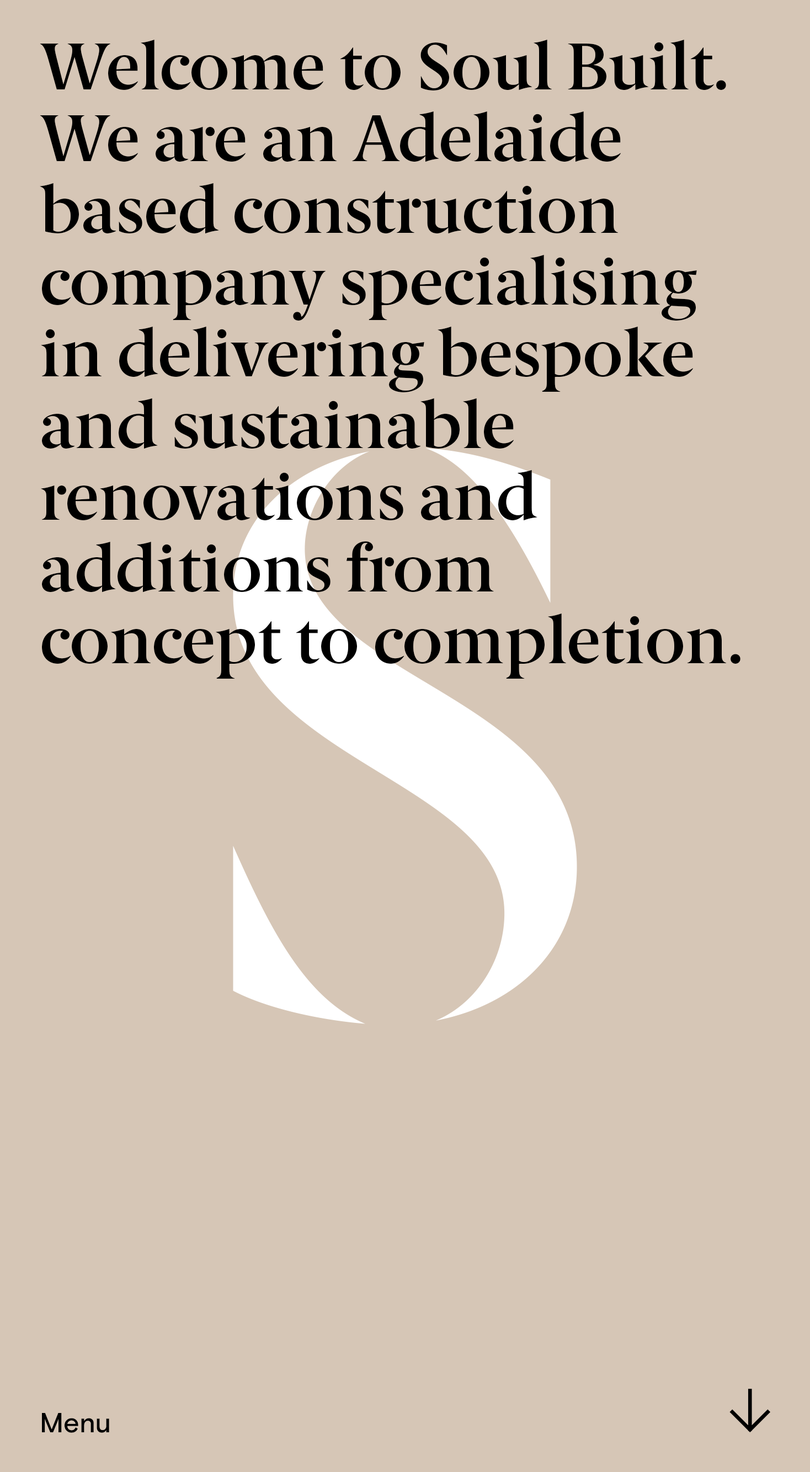
<style>
.page{position:relative;width:810px;height:1472px;background:#d6c6b6}
.page>*{position:absolute;margin:0}
.t1{font:66.2px "BerlingskeSerif-DemiBold";color:#000000}
.t2{font:66.2px "BerlingskeSerif-DemiBold";letter-spacing:-0.069em;color:#000000}
.t3{font:66.2px "BerlingskeSerif-DemiBold";letter-spacing:-0.019em;color:#000000}
.t4{font:66.2px "BerlingskeSerif-DemiBold";letter-spacing:-0.01em;color:#000000}
.t5{font:66.2px "BerlingskeSerif-DemiBold";letter-spacing:-0.03em;color:#000000}
.t6{font:66.2px "BerlingskeSerif-DemiBold";letter-spacing:-0.039em;color:#000000}
.t7{font:66.2px "BerlingskeSerif-DemiBold";letter-spacing:-0.049em;color:#000000}
.t8{font:66.2px "BerlingskeSerif-DemiBold";letter-spacing:-0.034em;color:#000000}
.t9{font:66.2px "BerlingskeSerif-DemiBold";letter-spacing:-0.029em;color:#000000}
.t10{font:66.2px "BerlingskeSerif-DemiBold";letter-spacing:-0.02em;color:#000000}
.t11{font:27.6px "BasisGrotesquePro-Medium";letter-spacing:-0.007em;color:#000000}
.t12{font:27.6px "BasisGrotesquePro-Medium";color:#000000}
.t13{font:27.6px "BasisGrotesquePro-Medium";letter-spacing:-0.009em;color:#000000}
</style>
<div class="page">
<p class="t1" style="left:40px;top:40px;width:686px;height:50px"><span class="t2">W</span>el<span class="t3">c</span>ome to Soul <span class="t4">B</span>uilt.</p>
<p class="t1" style="left:40px;top:111px;width:581px;height:51px"><span class="t2">W</span>e a<span class="t3">r</span>e an <span class="t5">A</span>delaide</p>
<p class="t1" style="left:40px;top:183px;width:579px;height:51px">based <span class="t3">c</span>on<span class="t5">s</span>truction</p>
<p class="t1" style="left:42px;top:255px;width:655px;height:66px"><span class="t3">c</span>ompa<span class="t6">n</span>y specialising</p>
<p class="t1" style="left:41px;top:327px;width:653px;height:65px">in del<span class="t5">i</span><span class="t7">v</span>ering bespo<span class="t8">k</span>e</p>
<p class="t1" style="left:42px;top:398px;width:472px;height:51px">and <span class="t5">s</span>u<span class="t9">s</span>tainable</p>
<p class="t1" style="left:41px;top:470px;width:496px;height:51px"><span class="t3">r</span>en<span class="t6">ov</span>ations and</p>
<p class="t1" style="left:42px;top:541px;width:452px;height:52px">additions f<span class="t10">r</span>om</p>
<p class="t1" style="left:42px;top:614px;width:698px;height:65px"><span class="t3">c</span>on<span class="t3">c</span>ept to <span class="t10">c</span>ompletion.</p>
<p class="t11" style="left:42px;top:1413px;width:67px;height:20px">M<span class="t12">e</span><span class="t13">n</span><span class="t12">u</span></p>
</div>
